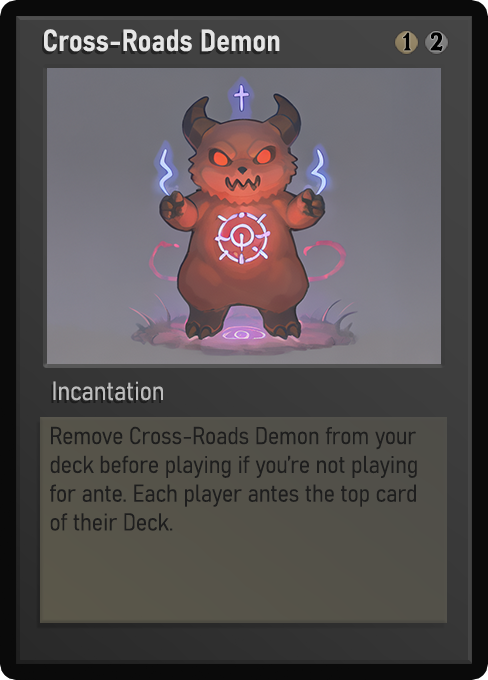
<style>
.page{position:relative;width:488px;height:680px}
.page>*{position:absolute;margin:0}
.t1{font:30px "Bahnschrift-SemiBoldSemiCondensed";color:#f2f2f2;font-weight:bold}
.t2{font:25px "WTRRoycroft";color:#000000;font-weight:bold;scale:1.09 1}
.t3{font:26px "Bahnschrift-LightSemiCondensed";color:#c8c8c8;font-weight:bold}
.t4{font:24px "Bahnschrift-LightSemiCondensed";color:#1e1e1e;font-weight:bold}
</style>
<div class="page">
<p class="t1" style="left:44px;top:29px;width:236px;height:23px;opacity:0.9">Cross-Roads Demon</p>
<p class="t2" style="left:403px;top:32px;width:8px;height:19px">1</p>
<p class="t2" style="left:430px;top:32px;width:13px;height:19px">2</p>
<p class="t3" style="left:53px;top:381px;width:110px;height:20px;opacity:0.9">Incantation</p>
<p class="t4" style="left:50px;top:426px;width:367px;height:105px">Remove Cross-Roads Demon from your deck before playing if you’re not playing for ante. Each player antes the top card of their Deck.</p>
</div>
